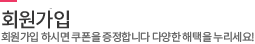
<style>
.page{position:relative;width:255px;height:44px;background:#ffffff}
.page>*{position:absolute;margin:0}
.t1{font:20px "NotoSansKR-Medium";letter-spacing:-0.05em;color:#373636}
.t2{font:11px "NotoSansKR-Regular";letter-spacing:-0.05em;color:#666666}
</style>
<div class="page">
<p class="t1" style="left:2px;top:10px;width:67px;height:19px">회원가입</p>
<p class="t2" style="left:1px;top:31px;width:253px;height:11px">회원가입 하시면 쿠폰을 증정합니다 다양한 해택을 누리세요!</p>
</div>
